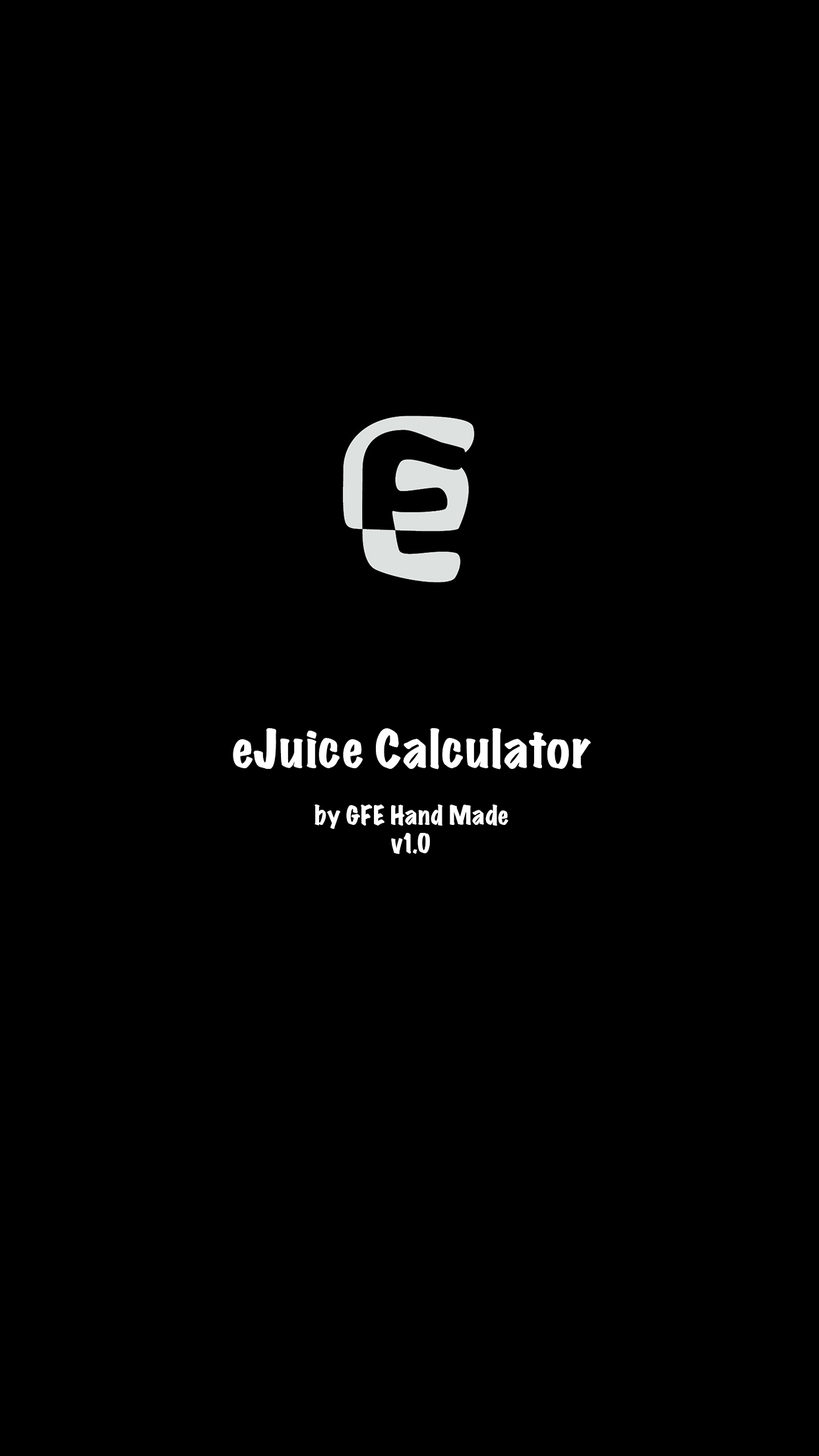
<style>
.page{position:relative;width:819px;height:1456px;background:#000000}
.page>*{position:absolute;margin:0}
.t1{font:23.7px "MarkerFelt-Wide";color:#ffffff}
.t2{font:47.5px "MarkerFelt-Wide";color:#ffffff}
</style>
<div class="page">
<p class="t1" style="left:233px;top:728px;width:358px;height:126px;text-align:center"><span class="t2">eJuice Calculator<br></span><br>by GFE Hand Made<br>v1.0</p>
</div>
